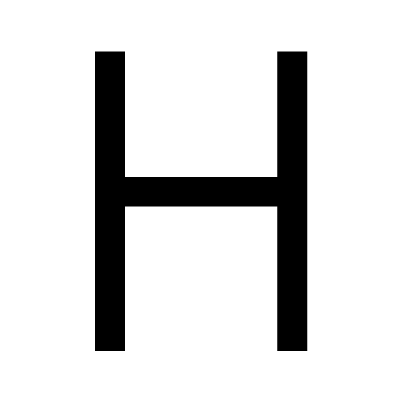
<style>
.page{position:relative;width:400px;height:400px;background:#ffffff}
.page>*{position:absolute;margin:0}
.t1{font:416.7px "CenturyGothic";color:#000000}
</style>
<div class="page">
<p class="t1" style="left:95px;top:51px;width:213px;height:300px">H</p>
</div>
